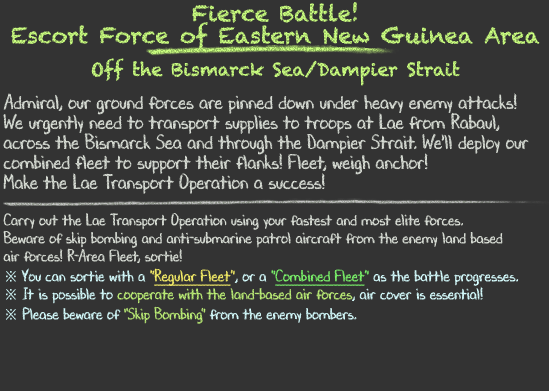
<style>
.page{position:relative;width:549px;height:391px;background:#333333}
.page>*{position:absolute;margin:0}
.t1{font:22px/36px "Chalkduster";color:#bcec77}
.t2{font:22px/22px "Chalkduster";color:#bcec77}
.t3{font:18px/36px "Chalkduster";color:#bcec77}
.t4{font:20px/20px "DJBChalkItUp";color:#d9ded6;scale:0.9 1}
.t5{font:16px/18px "DJBChalkItUp";color:#d9ded6;scale:0.9 1}
.t6{font:16px/20px "DJBChalkItUp";color:#d9ded6;scale:0.9 1}
.t7{font:16px/18px "TimesNewRomanPSMT";color:#d7feff;scale:0.9 1}
.t8{font:16px/18px "DJBChalkItUp";color:#d7feff;scale:0.9 1}
.t9{font:16px/18px "DJBChalkItUp";color:#f5ed68;scale:0.9 1}
.t10{font:16px/18px "DJBChalkItUp";color:#f5ed68;text-decoration:underline;scale:0.9 1}
.t11{font:16px/18px "DJBChalkItUp";color:#7bf26b;scale:0.9 1}
.t12{font:16px/18px "DJBChalkItUp";color:#7bf26b;text-decoration:underline;scale:0.9 1}
.t13{font:16px/20px "TimesNewRomanPSMT";color:#d7feff;scale:0.9 1}
.t14{font:16px/20px "DJBChalkItUp";color:#d7feff;scale:0.9 1}
.t15{font:16px/20px "DJBChalkItUp";color:#bdef78;scale:0.9 1}
.t16{font:16px/18px "DJBChalkItUp";color:#bdef78;scale:0.9 1}
</style>
<div class="page">
<p class="t1" style="left:11px;top:2px;width:529px;height:84px;text-align:center"><span class="t2">Fierce Battle!<br></span>Escort Force of Eastern New Guinea Area<br><span class="t3">Off the Bismarck Sea/Dampier Strait</span></p>
<p class="t4" style="left:3px;top:93px;width:526px;height:231px">Admiral, our ground forces are pinned down under heavy enemy attacks!<br>We urgently need to transport supplies to troops at Lae from Rabaul,<br>across the Bismarck Sea and through the Dampier Strait. We'll deploy our<br>combined fleet to support their flanks! Fleet, weigh anchor!<br>Make the Lae Transport Operation a success!<br><br><span class="t5">Carry out the Lae Transport Operation using your fastest and most elite forces.<br>Beware of skip bombing and anti-submarine patrol aircraft from the enemy land based<br></span><span class="t6">air forces! R-Area Fleet, sortie!<br></span><span class="t7">※ </span><span class="t8">You can sortie with a </span><span class="t9">"</span><span class="t10">Regular Fleet</span><span class="t9">"</span><span class="t8">, or a </span><span class="t11">"</span><span class="t12">Combined Fleet</span><span class="t11">" </span><span class="t8">as the battle progresses.<br></span><span class="t13">※</span><span class="t14"> It is possible to </span><span class="t15">cooperate with the land-based air forces</span><span class="t14">, air cover is essential!<br></span><span class="t7">※</span><span class="t8"> Please beware of </span><span class="t16">“Skip Bombing”</span><span class="t8"> from the enemy bombers.</span></p>
</div>
